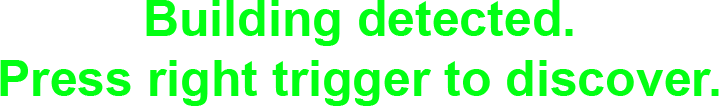
<style>
.page{position:relative;width:719px;height:106px;background:#ffffff}
.page>*{position:absolute;margin:0}
.t1{font:50px "Arial-BoldMT";color:#02ff13}
</style>
<div class="page">
<p class="t1" style="left:0px;top:0px;width:719px;height:106px;text-align:center">Building detected.<br>Press right trigger to discover.</p>
</div>
